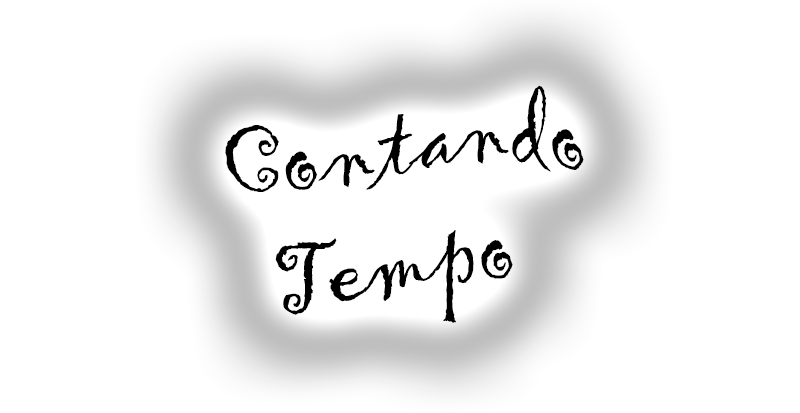
<style>
.page{position:relative;width:800px;height:413px;background:#ffffff}
.page>*{position:absolute;margin:0}
.t1{font:99px "Gigi-Regular";color:#000000}
</style>
<div class="page">
<p class="t1" style="left:225px;top:85px;width:359px;height:238px;text-align:center">Contando <br>Tempo</p>
</div>
